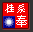
<style>
.page{position:relative;width:33px;height:32px;background:#f20000}
.page>*{position:absolute;margin:0}
.t1{font:10.4px "SimSun";color:#ffffff}
.t2{font:11.7px "SimSun";color:#ffffff}
</style>
<div class="page">
<p class="t1" style="left:5px;top:4px;width:20px;height:9px">桂系</p>
<p class="t2" style="left:16px;top:15px;width:11px;height:12px">奉</p>
</div>
